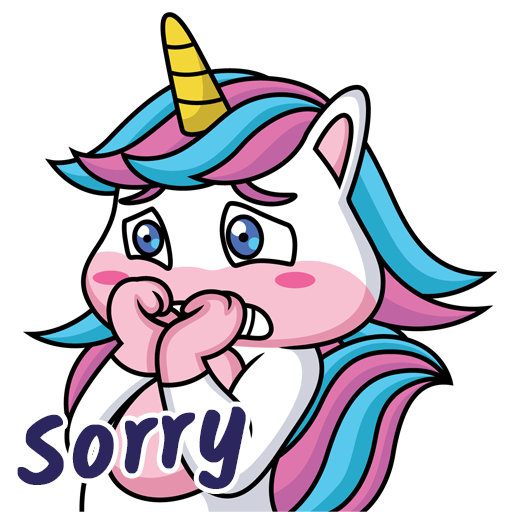
<style>
.page{position:relative;width:512px;height:512px;background:#ffffff}
.page>*{position:absolute;margin:0}
.t1{font:100px "Kalam-Bold";letter-spacing:0.025em;color:#2c265e;font-weight:bold}
</style>
<div class="page">
<p class="t1" style="left:17px;top:406px;width:229px;height:83px;rotate:-7deg">Sorry</p>
</div>
